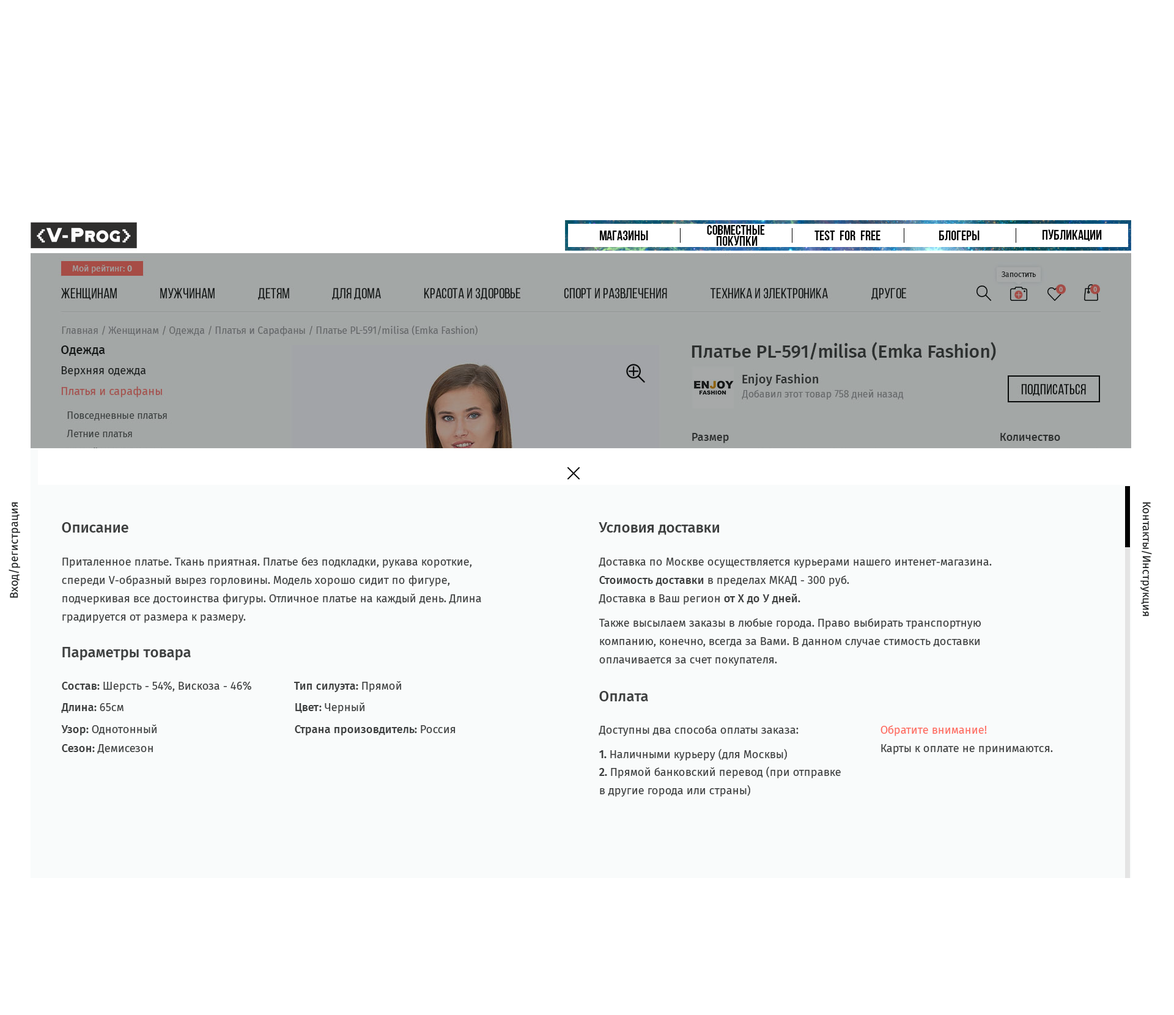
<style>
.page{position:relative;width:1174px;height:1015px;background:#ffffff}
.page>*{position:absolute;margin:0}
.t1{font:14.1px "BebasNeueBold";color:#000000}
.t2{font:14.1px/11px "BebasNeueBold";color:#000000}
.t3{font:11px "FiraSans-Regular";color:#171919}
.t4{font:14.7px "FiraSans-Medium";color:#3d3f3f}
.t5{font:11px/18.3px "FiraSans-Regular";color:#3d3f3f}
.t6{font:11px/18.3px "FiraSans-Medium";color:#3d3f3f}
.t7{font:11px "FiraSans-Regular";color:#3d3f3f}
.t8{font:11px "FiraSans-Medium";color:#3d3f3f}
.t9{font:11px/18.3px "FiraSans-Regular";color:#fe6c61}
.t10{font:11px "FiraSans-SemiBold";color:#3d3f3f}
.t11{font:11px/18.3px "FiraSans-SemiBold";color:#3d3f3f}
</style>
<div class="page">
<p class="t1" style="left:600px;top:231px;width:48px;height:9px">Магазины</p>
<p class="t2" style="left:707px;top:225px;width:58px;height:21px;text-align:center">Совместные <br>покупки</p>
<p class="t1" style="left:815px;top:231px;width:66px;height:9px">Test  for  free</p>
<p class="t1" style="left:940px;top:231px;width:40px;height:9px">Блогеры</p>
<p class="t1" style="left:1043px;top:229px;width:59px;height:13px">Публикации</p>
<p class="t3" style="left:9px;top:502px;width:11px;height:96px;rotate:-90deg">Вход/регистрация</p>
<p class="t3" style="left:1141px;top:502px;width:11px;height:115px;rotate:90deg">Контакты/Инструкция</p>
<p class="t4" style="left:62px;top:522px;width:66px;height:11px">Описание</p>
<p class="t4" style="left:599px;top:522px;width:120px;height:13px">Условия доставки</p>
<p class="t5" style="left:62px;top:557px;width:419px;height:66px">Приталенное платье. Ткань приятная. Платье без подкладки, рукава короткие, спереди V-образный вырез горловины. Модель хорошо сидит по фигуре, подчеркивая все достоинства фигуры. Отличное платье на каждый день. Длина градируется от размера к размеру.</p>
<p class="t5" style="left:599px;top:558px;width:393px;height:108px">Доставка по Москве осуществляется курьерами нашего интенет-магазина.<br><span class="t6">Стоимость доставки</span> в пределах МКАД - 300 руб.<br>Доставка в Ваш регион <span class="t6">от Х до У дней.<br></span>Также высылаем заказы в любые города. Право выбирать транспортную компанию, конечно, всегда за Вами. В данном случае стимость доставки оплачивается за счет покупателя.</p>
<p class="t4" style="left:62px;top:647px;width:129px;height:14px">Параметры товара</p>
<p class="t7" style="left:62px;top:681px;width:189px;height:11px"><span class="t8">Состав:</span> Шерсть - 54%, Вискоза - 46%</p>
<p class="t8" style="left:294px;top:681px;width:107px;height:11px">Тип силуэта:<span class="t7"> Прямой</span></p>
<p class="t4" style="left:599px;top:691px;width:49px;height:11px">Оплата</p>
<p class="t8" style="left:61px;top:703px;width:63px;height:10px">Длина:<span class="t7"> 65см</span></p>
<p class="t7" style="left:295px;top:703px;width:70px;height:11px"><span class="t8">Цвет:</span> Черный</p>
<p class="t7" style="left:61px;top:725px;width:96px;height:11px"><span class="t8">Узор:</span> Однотонный</p>
<p class="t8" style="left:295px;top:725px;width:161px;height:11px">Страна произовдитель:<span class="t7"> Россия</span></p>
<p class="t7" style="left:599px;top:725px;width:200px;height:11px">Доступны два способа оплаты заказа:</p>
<p class="t5" style="left:881px;top:725px;width:172px;height:30px"><span class="t9">Обратите внимание! <br></span>Карты к оплате не принимаются.</p>
<p class="t7" style="left:62px;top:744px;width:91px;height:10px"><span class="t8">Сезон:</span> Демисезон</p>
<p class="t7" style="left:599px;top:749px;width:188px;height:12px"><span class="t10">1.</span> Наличными курьеру (для Москвы)</p>
<p class="t5" style="left:599px;top:767px;width:242px;height:30px"><span class="t11">2.</span> Прямой банковский перевод (при отправке <br>в другие города или страны)</p>
</div>
